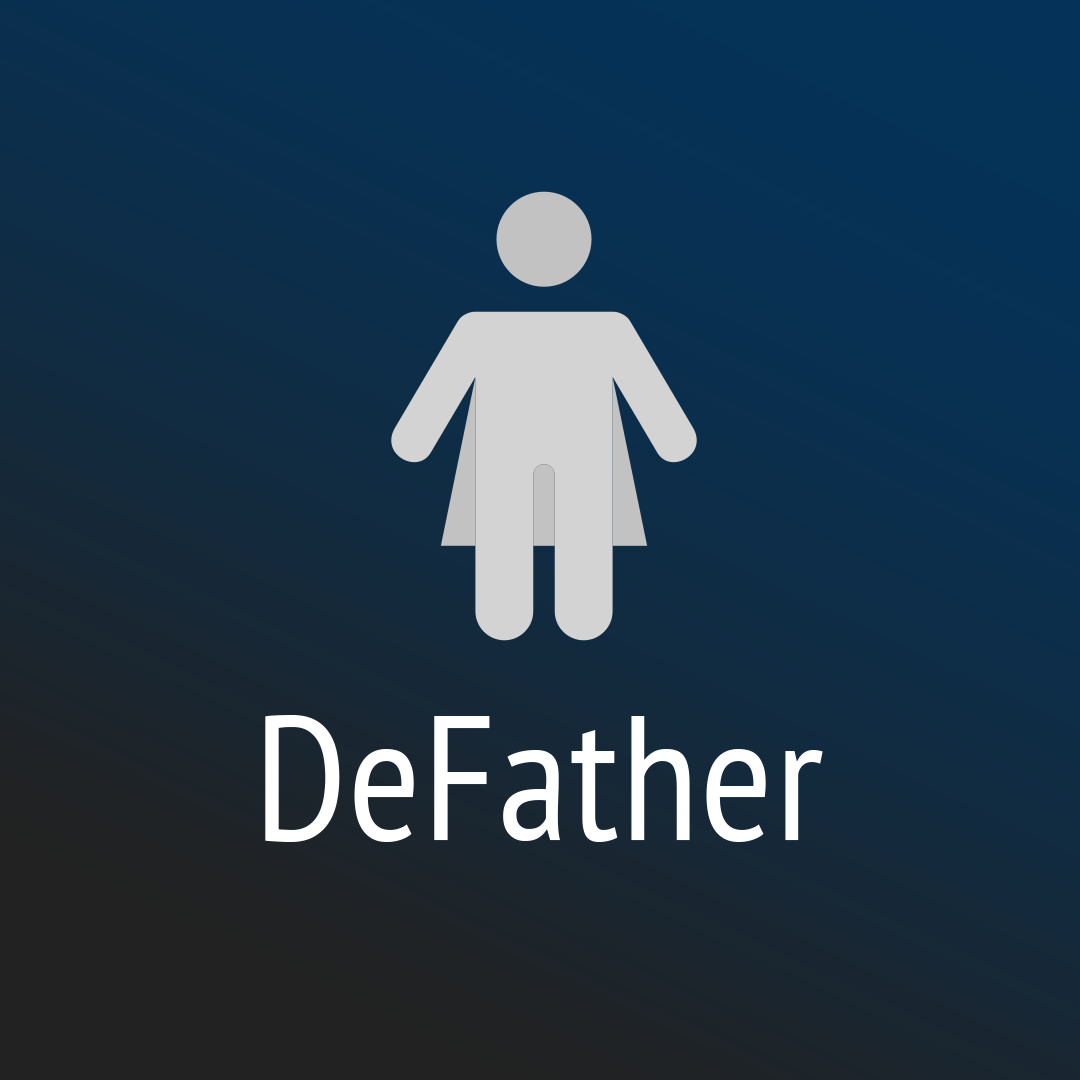
<style>
.page{position:relative;width:1080px;height:1080px}
.page>*{position:absolute;margin:0}
.t1{font:176.8px "PTSans-Narrow";letter-spacing:0.01em;color:#ffffff}
</style>
<div class="page">
<p class="t1" style="left:265px;top:715px;width:558px;height:127px">DeFather</p>
</div>
